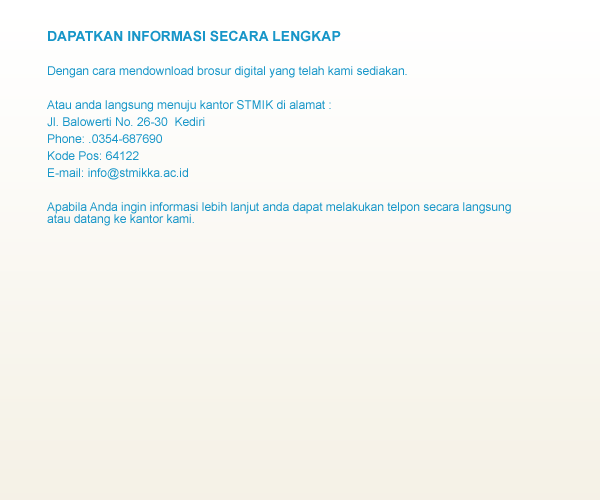
<style>
.page{position:relative;width:600px;height:500px}
.page>*{position:absolute;margin:0}
.t1{font:12px/12px "ArialMT";color:#1896c8}
.t2{font:14px/12px "Arial-BoldMT";color:#1896c8}
</style>
<div class="page">
<p class="t1" style="left:47px;top:30px;width:464px;height:196px"><span class="t2">DAPATKAN INFORMASI SECARA LENGKAP<br></span><br>Dengan cara mendownload brosur digital yang telah kami sediakan.<br><br>Atau anda langsung menuju kantor STMIK di alamat :<br>Jl. Balowerti No. 26-30  Kediri<br>Phone: .0354-687690<br>Kode Pos: 64122<br>E-mail: info@stmikka.ac.id<br><br>Apabila Anda ingin informasi lebih lanjut anda dapat melakukan telpon secara langsung atau datang ke kantor kami.</p>
</div>
